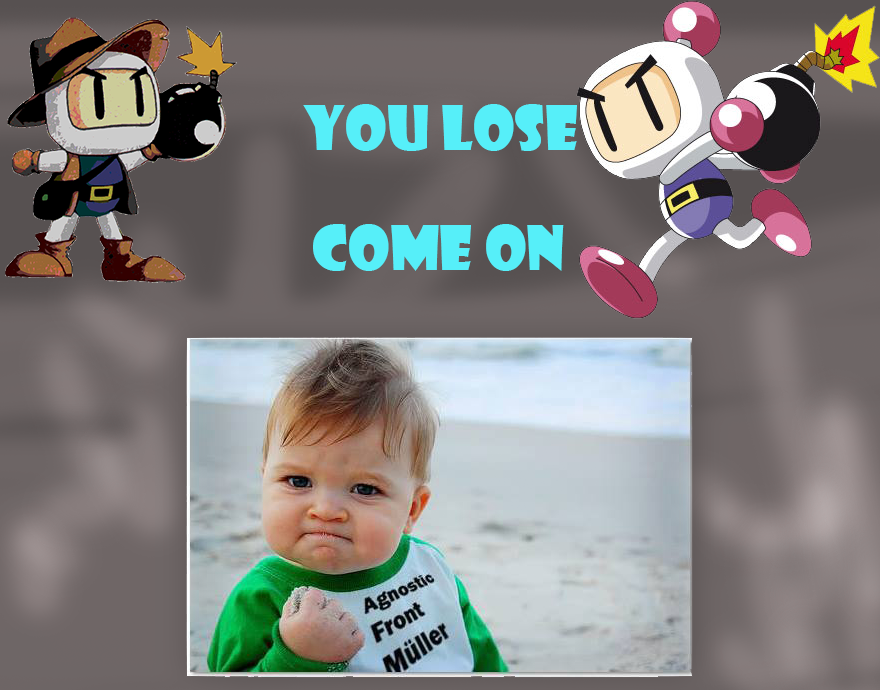
<style>
.page{position:relative;width:880px;height:690px}
.page>*{position:absolute;margin:0}
.t1{font:60.3px "ShowcardGothic-Reg";color:#56eff9}
</style>
<div class="page">
<p class="t1" style="left:303px;top:104px;width:274px;height:47px">you lose</p>
<p class="t1" style="left:313px;top:224px;width:251px;height:47px">Come on</p>
</div>
